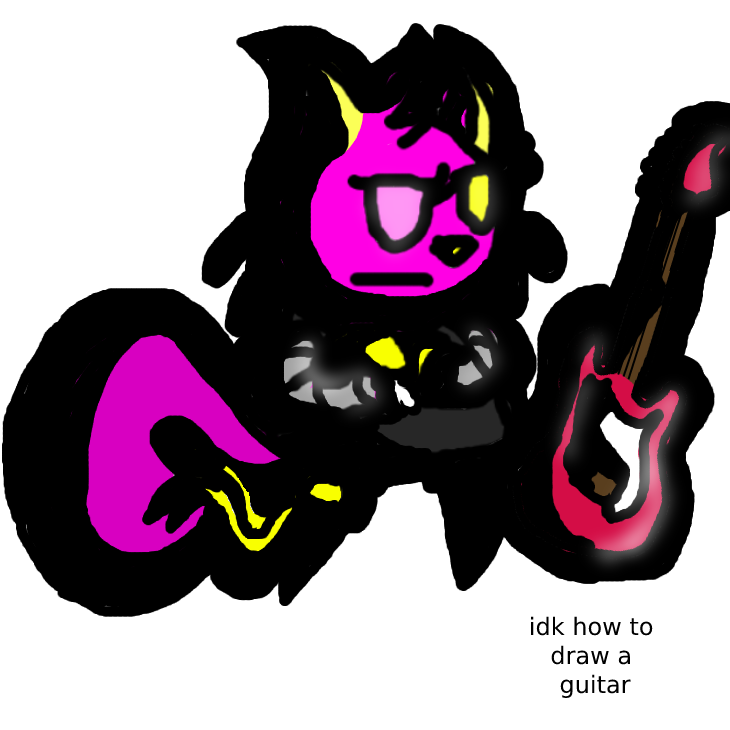
<style>
.page{position:relative;width:730px;height:730px;background:#ffffff}
.page>*{position:absolute;margin:0}
.t1{font:24px "DejaVuSans";color:#000000}
</style>
<div class="page">
<p class="t1" style="left:531px;top:616px;width:122px;height:82px;text-align:center">idk how to <br>draw a <br>guitar</p>
</div>
